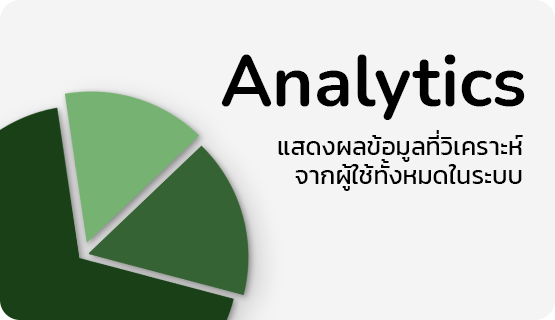
<style>
.page{position:relative;width:555px;height:320px;background:#f4f4f4}
.page>*{position:absolute;margin:0}
.t1{font:70.8px "Nunito-Bold";color:#000000}
.t2{font:25px/29.2px "Kanit-Regular";color:#000000}
</style>
<div class="page">
<p class="t1" style="left:221px;top:54px;width:304px;height:66px">Analytics</p>
<p class="t2" style="left:278px;top:130px;width:245px;height:61px;text-align:right">แสดงผลข้อมูลที่วิเคราะห์<br>จากผู้ใช้ทั้งหมดในระบบ</p>
</div>
